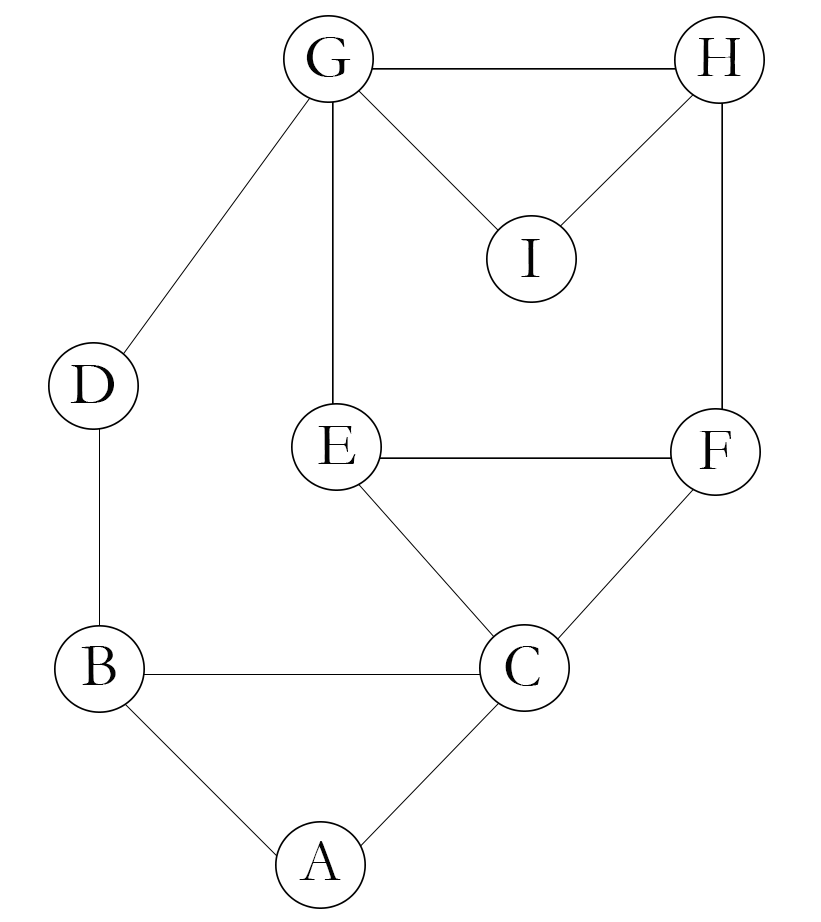
<style>
.page{position:relative;width:821px;height:922px;background:#ffffff}
.page>*{position:absolute;margin:0}
.t1{font:61.1px "Garamond";color:#030303}
</style>
<div class="page">
<p class="t1" style="left:306px;top:37px;width:45px;height:40px">G</p>
<p class="t1" style="left:697px;top:38px;width:44px;height:38px">H</p>
<p class="t1" style="left:521px;top:239px;width:19px;height:38px">I</p>
<p class="t1" style="left:70px;top:365px;width:44px;height:38px">D</p>
<p class="t1" style="left:318px;top:426px;width:38px;height:38px">E</p>
<p class="t1" style="left:699px;top:431px;width:32px;height:38px">F</p>
<p class="t1" style="left:81px;top:646px;width:35px;height:39px">B</p>
<p class="t1" style="left:505px;top:646px;width:35px;height:40px">C</p>
<p class="t1" style="left:299px;top:841px;width:42px;height:39px">A</p>
</div>
